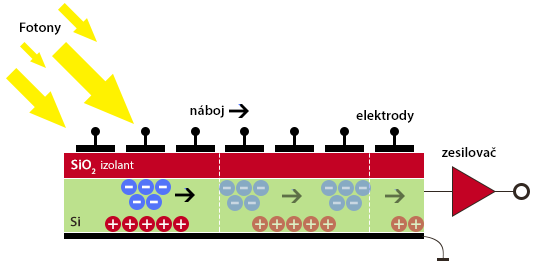
<style>
.page{position:relative;width:534px;height:264px;background:#ffffff}
.page>*{position:absolute;margin:0}
.t1{font:14px "MyriadPro-Semibold";color:#000000}
.t2{font:14px "MyriadPro-Semibold";color:#ffffff}
.t3{font:12px "MyriadPro-Regular";color:#fefefe}
.t4{font:30px "MyriadPro-Semibold";color:#ffffff}
.t5{font:30px "MyriadPro-Semibold";color:#c9d7e2}
.t6{font:14px "MyriadPro-Semibold";color:#322821}
.t7{font:18px "MyriadPro-Semibold";color:#ffffff}
.t8{font:18px "MyriadPro-Semibold";color:#def0c6}
</style>
<div class="page">
<p class="t1" style="left:20px;top:22px;width:41px;height:13px">Fotony</p>
<p class="t1" style="left:190px;top:105px;width:34px;height:13px">náboj</p>
<p class="t1" style="left:356px;top:110px;width:58px;height:13px">elektrody</p>
<p class="t1" style="left:442px;top:147px;width:54px;height:10px">zesilovač</p>
<p class="t2" style="left:71px;top:159px;width:25px;height:15px">SiO2</p>
<p class="t3" style="left:101px;top:160px;width:33px;height:9px">izolant</p>
<p class="t4" style="left:125px;top:185px;width:8px;height:4px">-</p>
<p class="t4" style="left:142px;top:185px;width:8px;height:4px">-</p>
<p class="t4" style="left:159px;top:185px;width:8px;height:4px">-</p>
<p class="t5" style="left:223px;top:186px;width:8px;height:4px">-</p>
<p class="t5" style="left:240px;top:186px;width:8px;height:4px">-</p>
<p class="t5" style="left:257px;top:186px;width:8px;height:4px">-</p>
<p class="t5" style="left:325px;top:186px;width:8px;height:4px">-</p>
<p class="t5" style="left:342px;top:186px;width:8px;height:4px">-</p>
<p class="t5" style="left:359px;top:186px;width:8px;height:4px">-</p>
<p class="t4" style="left:133px;top:200px;width:8px;height:4px">-</p>
<p class="t4" style="left:150px;top:200px;width:8px;height:4px">-</p>
<p class="t5" style="left:231px;top:201px;width:8px;height:4px">-</p>
<p class="t5" style="left:248px;top:201px;width:8px;height:4px">-</p>
<p class="t5" style="left:333px;top:201px;width:8px;height:4px">-</p>
<p class="t5" style="left:350px;top:201px;width:8px;height:4px">-</p>
<p class="t6" style="left:70px;top:216px;width:10px;height:11px">Si</p>
<p class="t7" style="left:108px;top:219px;width:10px;height:10px">+</p>
<p class="t7" style="left:125px;top:219px;width:10px;height:10px">+</p>
<p class="t7" style="left:142px;top:219px;width:10px;height:10px">+</p>
<p class="t7" style="left:159px;top:219px;width:10px;height:10px">+</p>
<p class="t7" style="left:176px;top:219px;width:10px;height:10px">+</p>
<p class="t8" style="left:255px;top:219px;width:10px;height:10px">+</p>
<p class="t8" style="left:272px;top:219px;width:10px;height:10px">+</p>
<p class="t8" style="left:289px;top:219px;width:10px;height:10px">+</p>
<p class="t8" style="left:306px;top:219px;width:10px;height:10px">+</p>
<p class="t8" style="left:323px;top:219px;width:10px;height:10px">+</p>
<p class="t8" style="left:394px;top:219px;width:10px;height:10px">+</p>
<p class="t8" style="left:411px;top:219px;width:10px;height:10px">+</p>
</div>
